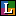
<style>
.page{position:relative;width:16px;height:16px;background:#000000}
.page>*{position:absolute;margin:0}
.t1{font:13.5px "TimesNewRomanPS-BoldMT";color:#ffffff}
.t2{font:13.5px "TimesNewRomanPS-BoldMT";color:#010101}
</style>
<div class="page">
<p class="t1" style="left:4px;top:3px;width:8px;height:10px">L</p>
<p class="t2" style="left:5px;top:4px;width:8px;height:10px">L</p>
</div>
